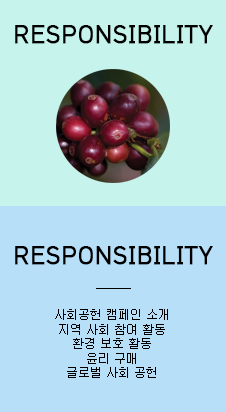
<style>
.page{position:relative;width:226px;height:412px;background:#b7e0f8}
.page>*{position:absolute;margin:0}
.t1{font:24px "HCRDotum";color:#000000;font-weight:bold}
.t2{font:12px "New-Gulim";color:#000000}
.t3{font:12px/120px "New-Gulim";color:#000000}
</style>
<div class="page">
<p class="t1" style="left:15px;top:25px;width:198px;height:19px">RESPONSIBILITY</p>
<p class="t1" style="left:15px;top:246px;width:198px;height:19px">RESPONSIBILITY</p>
<p class="t2" style="left:55px;top:309px;width:113px;height:69px;text-align:center"><span class="t3">사회공헌 캠페인 소개<br></span>지역 사회 참여 활동<br>환경 보호 활동<br>윤리 구매<br>글로벌 사회 공헌</p>
</div>
